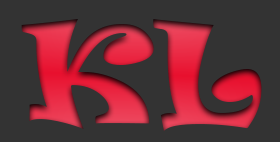
<style>
.page{position:relative;width:280px;height:142px;background:#333333}
.page>*{position:absolute;margin:0}
.t1{font:130.8px "Ravie";scale:1.04 1}
</style>
<div class="page">
<p class="t1" style="left:21px;top:19px;width:241px;height:112px">KL</p>
</div>
